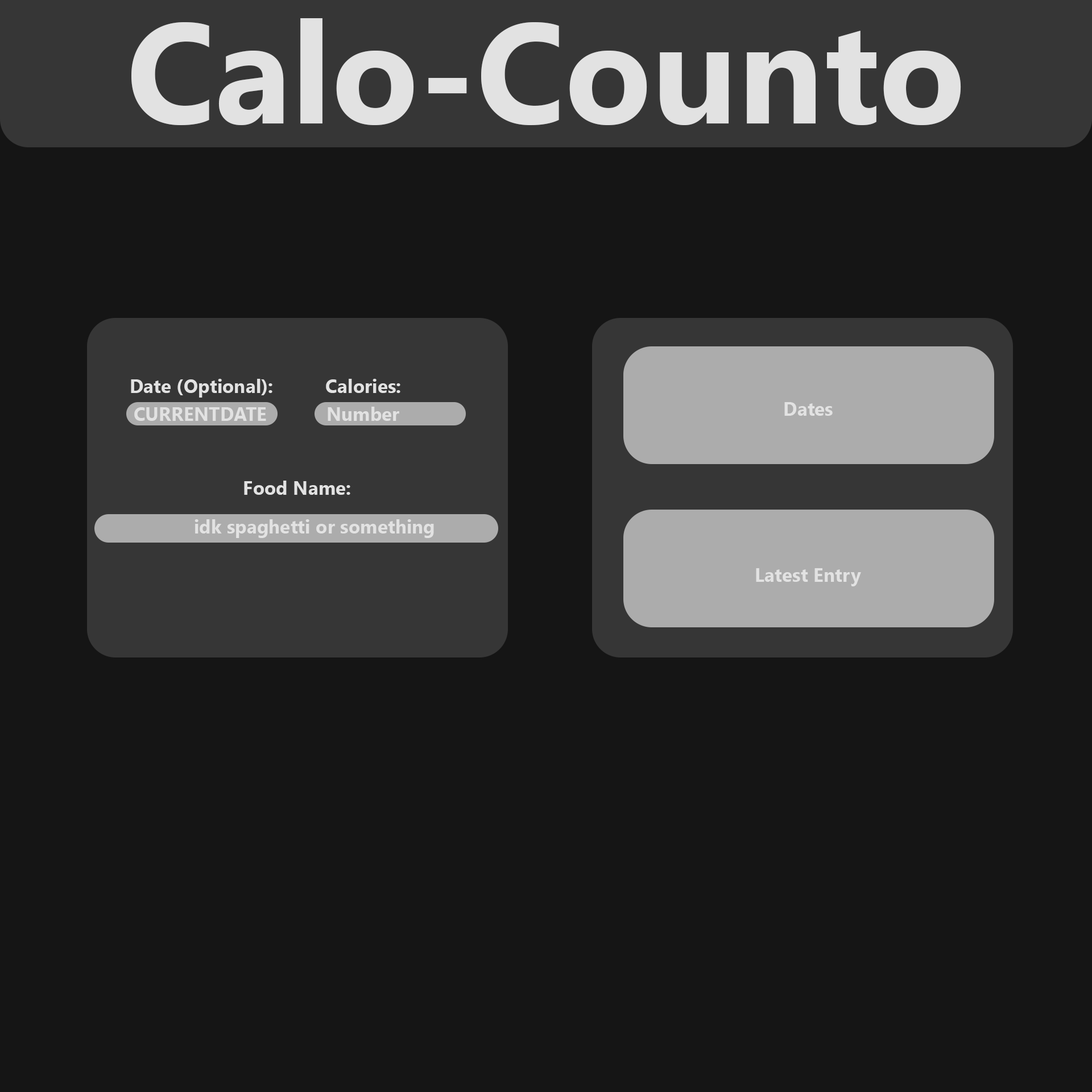
<style>
.page{position:relative;width:1092px;height:1092px;background:#151515}
.page>*{position:absolute;margin:0}
.t1{font:142.2px "SegoeUI-Bold";color:#e2e2e2}
.t2{font:19px "SegoeUI-Bold";color:#e2e2e2}
</style>
<div class="page">
<p class="t1" style="left:131px;top:18px;width:830px;height:107px">Calo-Counto</p>
<p class="t2" style="left:131px;top:379px;width:141px;height:19px">Date (Optional):</p>
<p class="t2" style="left:326px;top:379px;width:74px;height:14px">Calories:</p>
<p class="t2" style="left:134px;top:407px;width:132px;height:14px">CURRENTDATE</p>
<p class="t2" style="left:328px;top:407px;width:71px;height:14px">Number</p>
<p class="t2" style="left:784px;top:402px;width:49px;height:14px">Dates</p>
<p class="t2" style="left:244px;top:481px;width:106px;height:14px">Food Name:</p>
<p class="t2" style="left:195px;top:519px;width:239px;height:19px">idk spaghetti or something</p>
<p class="t2" style="left:756px;top:568px;width:105px;height:18px">Latest Entry</p>
</div>
